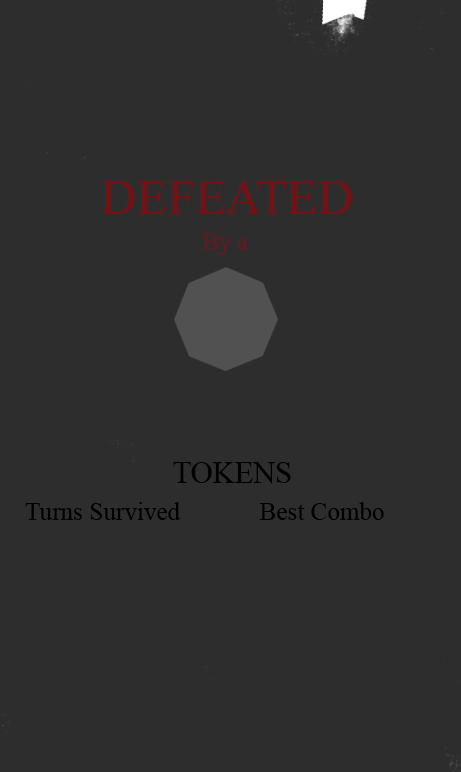
<style>
.page{position:relative;width:461px;height:772px;background:#2d2d2d}
.page>*{position:absolute;margin:0}
.t1{font:50px "TimesNewRomanPSMT";color:#751015}
.t2{font:25px "TimesNewRomanPSMT";color:#66181c}
.t3{font:30.5px "TimesNewRomanPSMT";color:#000000}
.t4{font:25px "TimesNewRomanPSMT";color:#000000}
</style>
<div class="page">
<p class="t1" style="left:100px;top:180px;width:252px;height:34px">DEFEATED</p>
<p class="t2" style="left:202px;top:233px;width:47px;height:22px">By a</p>
<p class="t3" style="left:173px;top:462px;width:118px;height:22px">TOKENS</p>
<p class="t4" style="left:25px;top:502px;width:155px;height:18px">Turns Survived</p>
<p class="t4" style="left:259px;top:502px;width:125px;height:18px">Best Combo</p>
</div>
